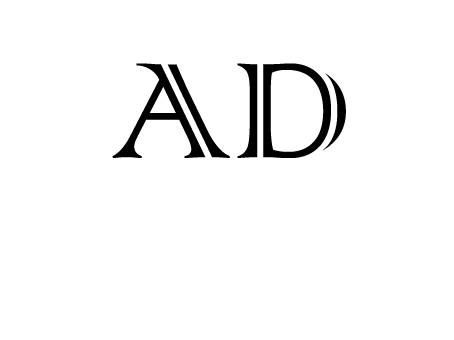
<style>
.page{position:relative;width:454px;height:340px;background:#ffffff}
.page>*{position:absolute;margin:0}
.t1{font:179.7px "ColonnaMT";color:#000000}
</style>
<div class="page">
<p class="t1" style="left:112px;top:63px;width:234px;height:95px">AD</p>
</div>
